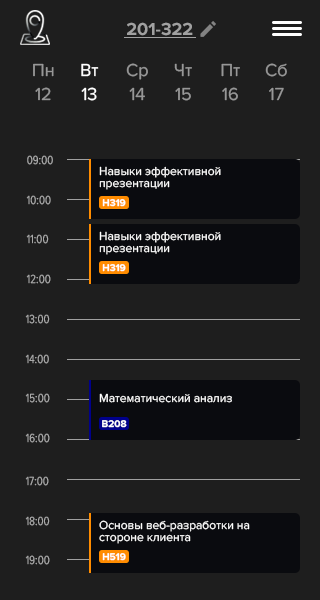
<style>
.page{position:relative;width:320px;height:600px;background:#1e1e1e}
.page>*{position:absolute;margin:0}
.t1{font:18px "ProximaNova-Bold";color:#a1a1a1}
.t2{font:18px/24px "ProximaNova-Regular";color:#979797}
.t3{font:18px/24px "ProximaNova-Regular";color:#ffffff}
.t4{font:12px "ProximaNovaCond-Light";color:#a8a8a8}
.t5{font:12px/12px "ProximaNova-Regular";color:#ffffff}
.t6{font:10px "ProximaNova-Bold";color:#ffffff}
.t7{font:12px "ProximaNova-Regular";color:#ffffff}
</style>
<div class="page">
<p class="t1" style="left:127px;top:22px;width:66px;height:14px">201-322</p>
<p class="t2" style="left:33px;top:63px;width:21px;height:38px;text-align:center">Пн<br>12</p>
<p class="t3" style="left:81px;top:63px;width:18px;height:38px;text-align:center">Вт<br>13</p>
<p class="t2" style="left:126px;top:63px;width:22px;height:38px;text-align:center">Ср<br>14</p>
<p class="t2" style="left:174px;top:63px;width:18px;height:38px;text-align:center">Чт<br>15</p>
<p class="t2" style="left:221px;top:63px;width:19px;height:38px;text-align:center">Пт<br>16</p>
<p class="t2" style="left:265px;top:63px;width:22px;height:38px;text-align:center">Сб<br>17</p>
<p class="t4" style="left:27px;top:155px;width:26px;height:10px">09:00</p>
<p class="t5" style="left:99px;top:166px;width:122px;height:24px">Навыки эффективной презентации</p>
<p class="t4" style="left:26px;top:195px;width:25px;height:10px">10:00</p>
<p class="t6" style="left:102px;top:199px;width:24px;height:8px">H319</p>
<p class="t5" style="left:99px;top:231px;width:122px;height:24px">Навыки эффективной презентации</p>
<p class="t4" style="left:26px;top:234px;width:23px;height:10px">11:00</p>
<p class="t6" style="left:102px;top:264px;width:24px;height:8px">H319</p>
<p class="t4" style="left:26px;top:274px;width:25px;height:10px">12:00</p>
<p class="t4" style="left:25px;top:314px;width:25px;height:10px">13:00</p>
<p class="t4" style="left:25px;top:354px;width:24px;height:10px">14:00</p>
<p class="t4" style="left:25px;top:393px;width:25px;height:10px">15:00</p>
<p class="t7" style="left:99px;top:393px;width:133px;height:10px">Математический анализ</p>
<p class="t6" style="left:102px;top:420px;width:25px;height:8px">B208</p>
<p class="t4" style="left:25px;top:433px;width:25px;height:10px">16:00</p>
<p class="t4" style="left:25px;top:476px;width:24px;height:10px">17:00</p>
<p class="t4" style="left:25px;top:516px;width:25px;height:10px">18:00</p>
<p class="t5" style="left:99px;top:520px;width:151px;height:24px">Основы веб-разработки на стороне клиента</p>
<p class="t4" style="left:25px;top:555px;width:25px;height:10px">19:00</p>
<p class="t6" style="left:102px;top:553px;width:24px;height:8px">H519</p>
</div>
